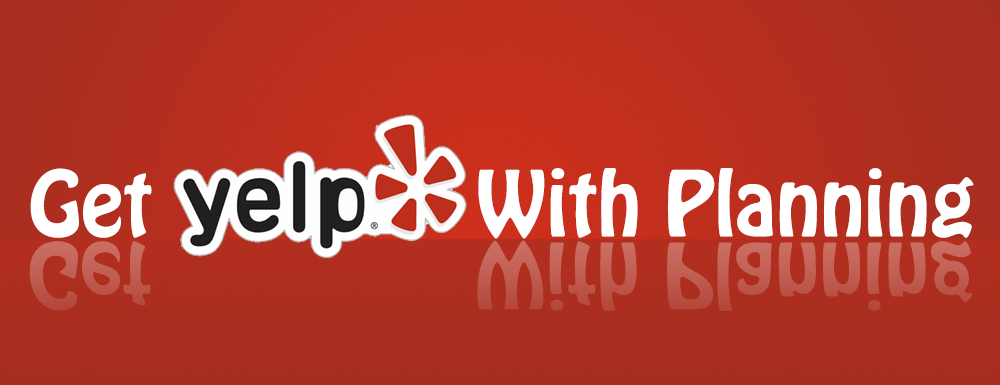
<style>
.page{position:relative;width:1000px;height:385px}
.page>*{position:absolute;margin:0}
.t1{font:80px "HoboStd";color:#ffffff}
</style>
<div class="page">
<p class="t1" style="left:30px;top:168px;width:944px;height:71px">Get              With Planning</p>
</div>
